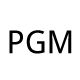
<style>
.page{position:relative;width:80px;height:80px;background:#ffffff}
.page>*{position:absolute;margin:0}
.t1{font:31.8px "DroidSans";color:#000000}
</style>
<div class="page">
<p class="t1" style="left:9px;top:30px;width:63px;height:24px">PGM</p>
</div>
